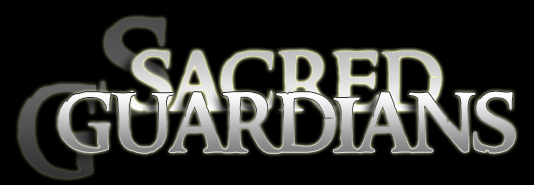
<style>
.page{position:relative;width:534px;height:185px;background:#000000}
.page>*{position:absolute;margin:0}
.t1{font:151.6px "RingbearerMedium";scale:1.05 1}
.t2{font:95.8px "RingbearerMedium"}
.t3{font:151px "RingbearerMedium";scale:0.94 1}
</style>
<div class="page">
<p class="t1" style="left:100px;top:17px;width:69px;height:97px">s</p>
<p class="t2" style="left:130px;top:50px;width:312px;height:62px">sacred</p>
<p class="t3" style="left:18px;top:84px;width:78px;height:95px">g</p>
<p class="t2" style="left:58px;top:91px;width:457px;height:62px">guardians</p>
</div>
